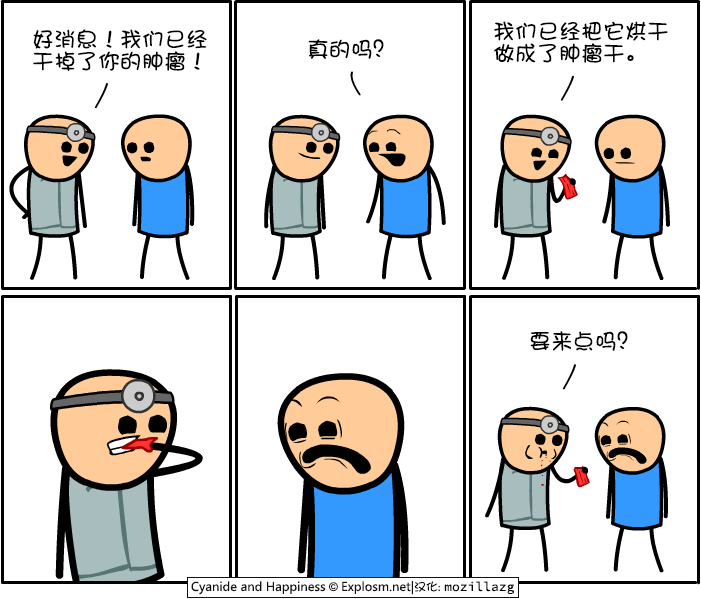
<style>
.page{position:relative;width:701px;height:599px;background:#ffffff}
.page>*{position:absolute;margin:0}
.t1{font:22px/22px "DFShaoNvW5";color:#000000}
.t2{font:22px "DFShaoNvW5";color:#000000}
</style>
<div class="page">
<p class="t1" style="left:33px;top:29px;width:174px;height:42px">好消息！我们已经<br>干掉了你的肿瘤！</p>
<p class="t1" style="left:494px;top:21px;width:174px;height:42px">我们已经把它烘干<br>做成了肿瘤干。</p>
<p class="t2" style="left:308px;top:39px;width:76px;height:20px">真的吗？</p>
<p class="t2" style="left:530px;top:331px;width:98px;height:20px">要来点吗？</p>
</div>
